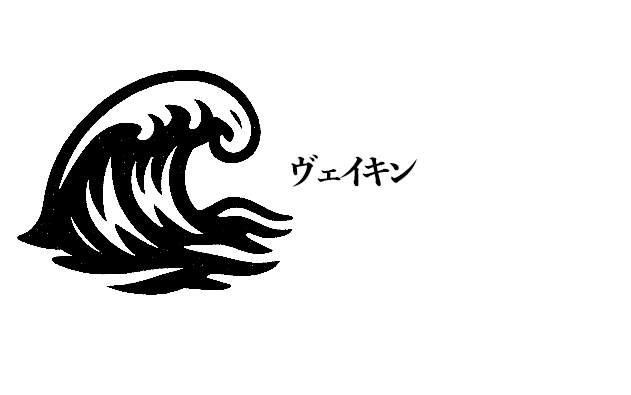
<style>
.page{position:relative;width:631px;height:395px;background:#ffffff}
.page>*{position:absolute;margin:0}
.t1{font:36px "ToppanBunkyuMidashiMinchoStdN-ExtraBold";color:#000000}
</style>
<div class="page">
<p class="t1" style="left:291px;top:154px;width:126px;height:33px">ヴェイキン</p>
</div>
